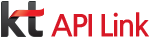
<style>
.page{position:relative;width:150px;height:38px;background:#ffffff}
.page>*{position:absolute;margin:0}
.t1{font:30px "NanumGothicBold";letter-spacing:-0.05em;color:#d71826}
</style>
<div class="page">
<p class="t1" style="left:51px;top:12px;width:98px;height:25px">API Link</p>
</div>
